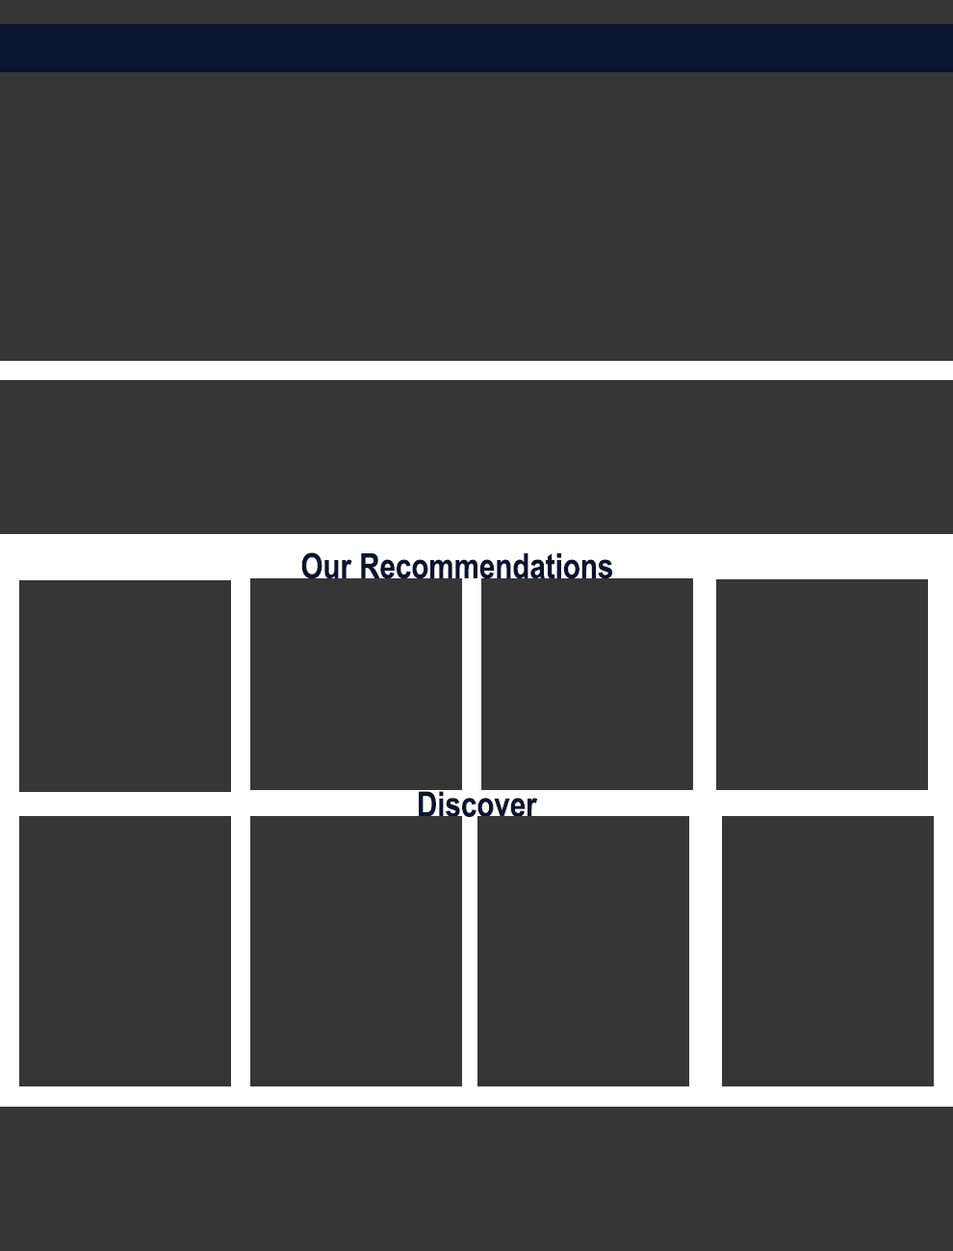
<style>
.page{position:relative;width:953px;height:1251px;background:#363636}
.page>*{position:absolute;margin:0}
.t1{font:34.7px "ArialNarrow-Bold";color:#09142f}
</style>
<div class="page">
<p class="t1" style="left:301px;top:553px;width:311px;height:26px">Our Recommendations</p>
<p class="t1" style="left:419px;top:791px;width:119px;height:26px">Discover</p>
</div>
